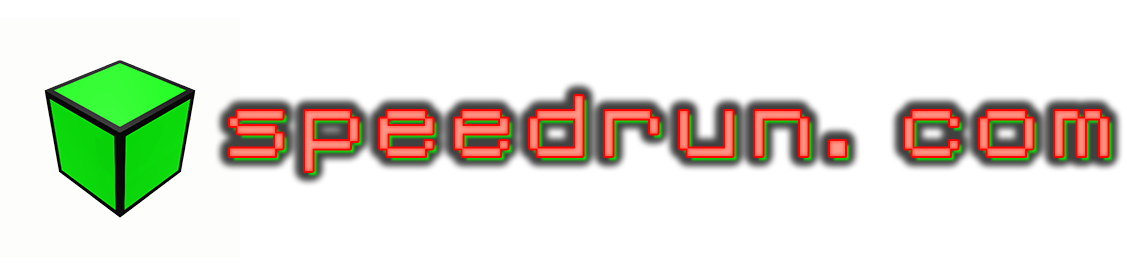
<style>
.page{position:relative;width:1127px;height:266px;background:#ffffff}
.page>*{position:absolute;margin:0}
.t1{font:120px "Roentgen-NBP";color:#ff8474}
</style>
<div class="page">
<p class="t1" style="left:230px;top:96px;width:878px;height:75px">speedrun.com</p>
</div>
